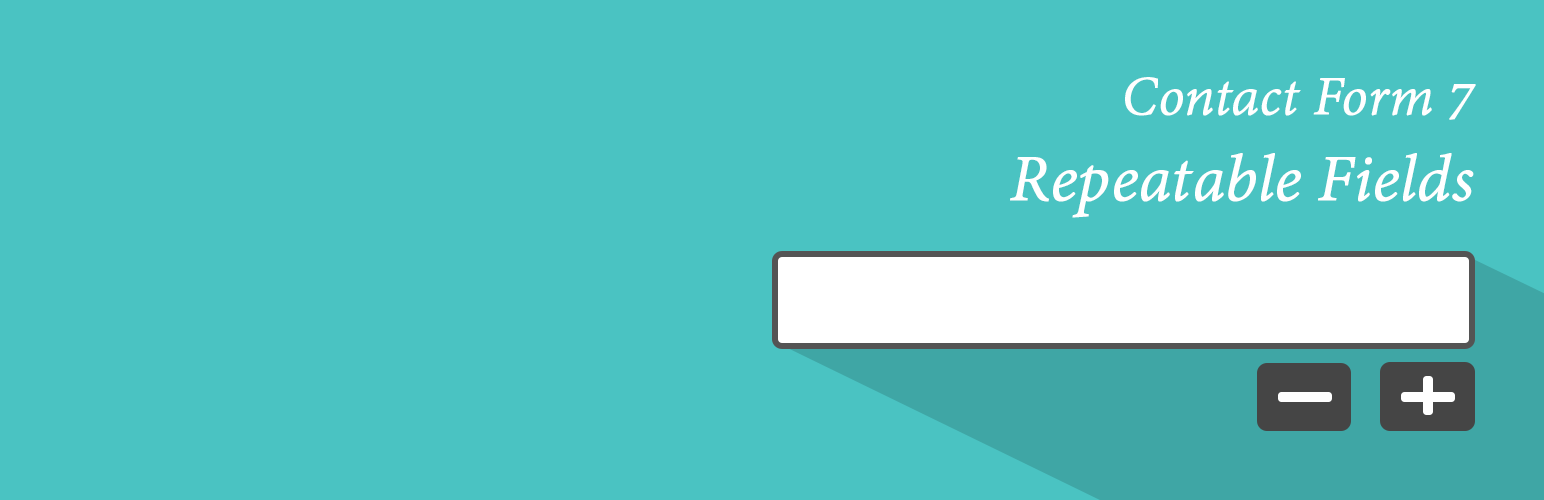
<style>
.page{position:relative;width:1544px;height:500px;background:#4ac3c2}
.page>*{position:absolute;margin:0}
.t1{font:72px "AdobeDevanagari-Italic";color:#ffffff;font-weight:bold}
.t2{font:60px "AdobeDevanagari-Italic";color:#ffffff;font-weight:bold}
</style>
<div class="page">
<p class="t1" style="left:1010px;top:77px;width:466px;height:141px;text-align:right"><span class="t2">Contact Form 7<br></span>Repeatable Fields</p>
</div>
